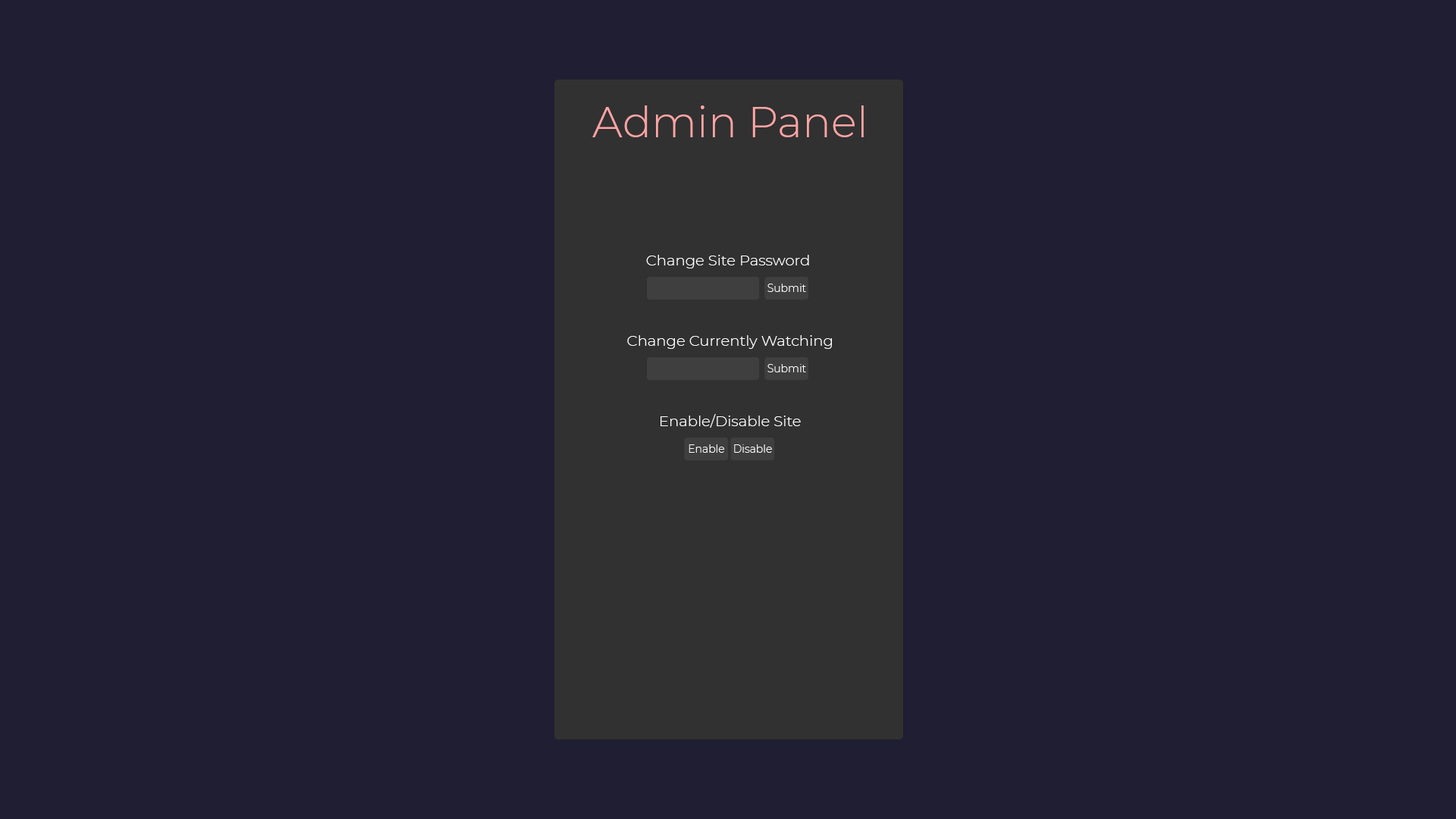
<style>
.page{position:relative;width:1456px;height:819px;background:#1f1e33}
.page>*{position:absolute;margin:0}
.t1{font:42.7px "Montserrat-Light";color:#ffa4a4}
.t2{font:14.9px "Montserrat-Light";color:#ffffff}
.t3{font:10.6px "Montserrat-Light";color:#ffffff}
</style>
<div class="page">
<p class="t1" style="left:592px;top:105px;width:272px;height:32px">Admin Panel</p>
<p class="t2" style="left:646px;top:255px;width:163px;height:13px">Change Site Password</p>
<p class="t3" style="left:767px;top:284px;width:39px;height:8px">Submit</p>
<p class="t2" style="left:627px;top:335px;width:205px;height:14px">Change Currently Watching</p>
<p class="t3" style="left:767px;top:364px;width:39px;height:8px">Submit</p>
<p class="t2" style="left:660px;top:414px;width:141px;height:14px">Enable/Disable Site</p>
<p class="t3" style="left:689px;top:444px;width:35px;height:9px">Enable</p>
<p class="t3" style="left:734px;top:444px;width:38px;height:9px">Disable</p>
</div>
